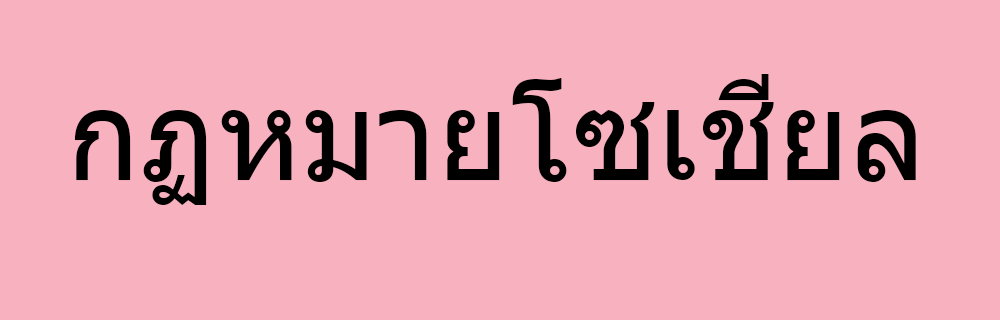
<style>
.page{position:relative;width:1000px;height:320px;background:#f8b1bf}
.page>*{position:absolute;margin:0}
.t1{font:125px "Tahoma";color:#000000}
</style>
<div class="page">
<p class="t1" style="left:74px;top:74px;width:842px;height:131px">กฏหมายโซเชียล</p>
</div>
